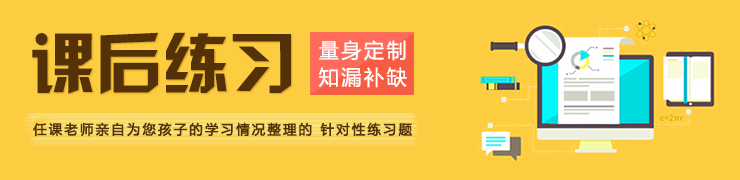
<style>
.page{position:relative;width:740px;height:180px;background:#fccd41}
.page>*{position:absolute;margin:0}
.t1{font:66.3px "HYk2gj";color:#553107}
.t2{font:20.4px/5.1px "MicrosoftYaHei";letter-spacing:0.13em;color:#ffffff}
.t3{font:13.3px "MicrosoftYaHei";letter-spacing:0.15em;color:#553107;font-weight:bold}
</style>
<div class="page">
<p class="t1" style="left:32px;top:32px;width:259px;height:63px">课后练习</p>
<p class="t2" style="left:318px;top:40px;width:89px;height:48px">量身定制<br>知漏补缺</p>
<p class="t3" style="left:33px;top:122px;width:379px;height:15px">任课老师亲自为您孩子的学习情况整理的 针对性练习题</p>
</div>
